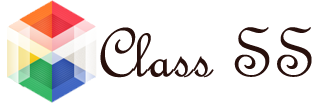
<style>
.page{position:relative;width:317px;height:103px;background:#ffffff}
.page>*{position:absolute;margin:0}
.t1{font:74.5px "FrenchScriptMT";letter-spacing:0.017em;color:#28100c;scale:0.96 1}
</style>
<div class="page">
<p class="t1" style="left:100px;top:27px;width:212px;height:51px">Class SS</p>
</div>
